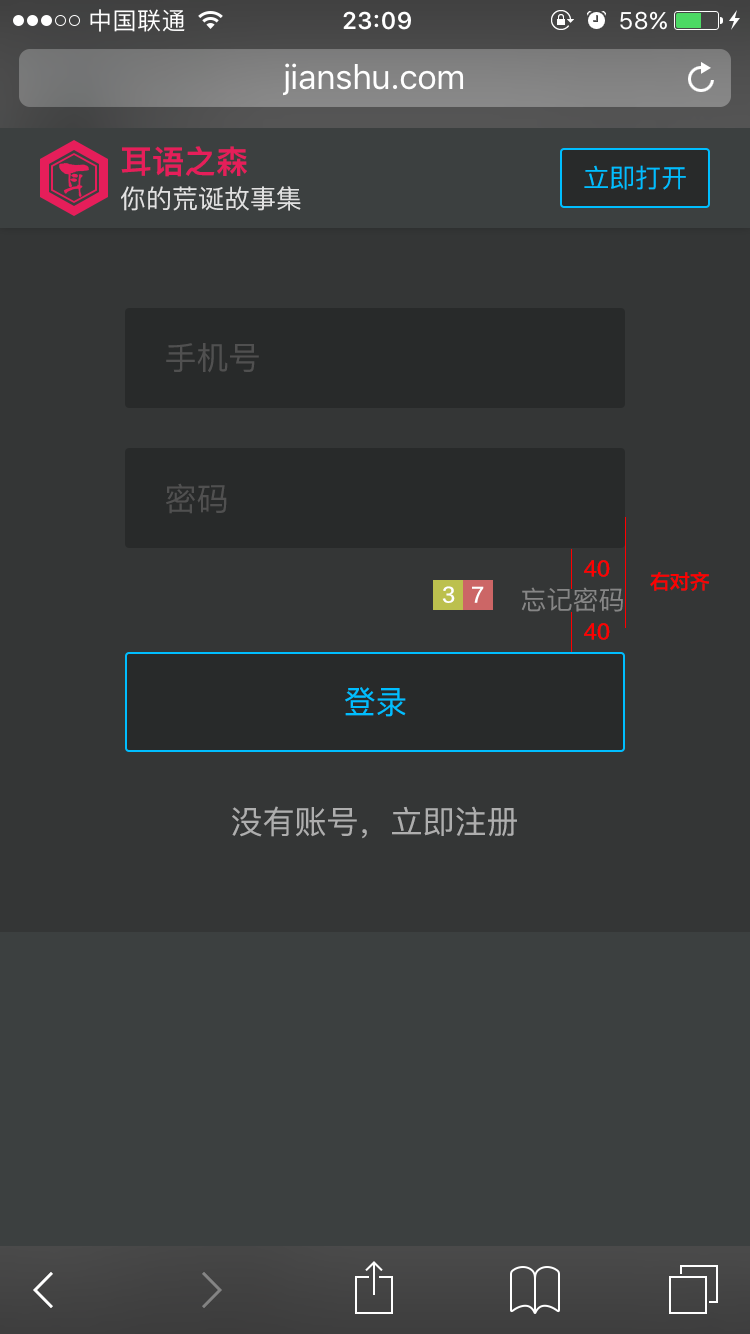
<style>
.page{position:relative;width:750px;height:1334px;background:#343636}
.page>*{position:absolute;margin:0}
.t1{font:32px "PingFangSC-Semibold";color:#e61e5a}
.t2{font:26px "PingFangSC-Regular";color:#00beff}
.t3{font:26px "PingFangSC-Regular";color:#e1e1e1}
.t4{font:32px "PingFangSC-Regular";color:#505050}
.t5{font:20px "FZLTZHK--GBK1-0";color:#ff0000}
.t6{font:20px "FZLTZHK--GBK1-0";color:#ffffff}
.t7{font:26px "PingFangSC-Regular";color:#868686}
.t8{font:32px "PingFangSC-Regular";color:#00beff}
.t9{font:32px "PingFangSC-Regular";color:#aeaeae}
</style>
<div class="page">
<p class="t1" style="left:121px;top:146px;width:126px;height:31px">耳语之森</p>
<p class="t2" style="left:584px;top:165px;width:102px;height:25px">立即打开</p>
<p class="t3" style="left:121px;top:186px;width:180px;height:25px">你的荒诞故事集</p>
<p class="t4" style="left:166px;top:343px;width:93px;height:30px">手机号</p>
<p class="t4" style="left:166px;top:483px;width:61px;height:31px">密码</p>
<p class="t5" style="left:584px;top:560px;width:26px;height:17px">40</p>
<p class="t5" style="left:650px;top:572px;width:59px;height:19px">右对齐</p>
<p class="t6" style="left:442px;top:586px;width:13px;height:17px">3</p>
<p class="t6" style="left:472px;top:586px;width:12px;height:17px">7</p>
<p class="t7" style="left:521px;top:587px;width:102px;height:25px">忘记密码</p>
<p class="t5" style="left:584px;top:623px;width:26px;height:17px">40</p>
<p class="t8" style="left:345px;top:687px;width:61px;height:30px">登录</p>
<p class="t9" style="left:232px;top:806px;width:285px;height:33px">没有账号，立即注册</p>
</div>
